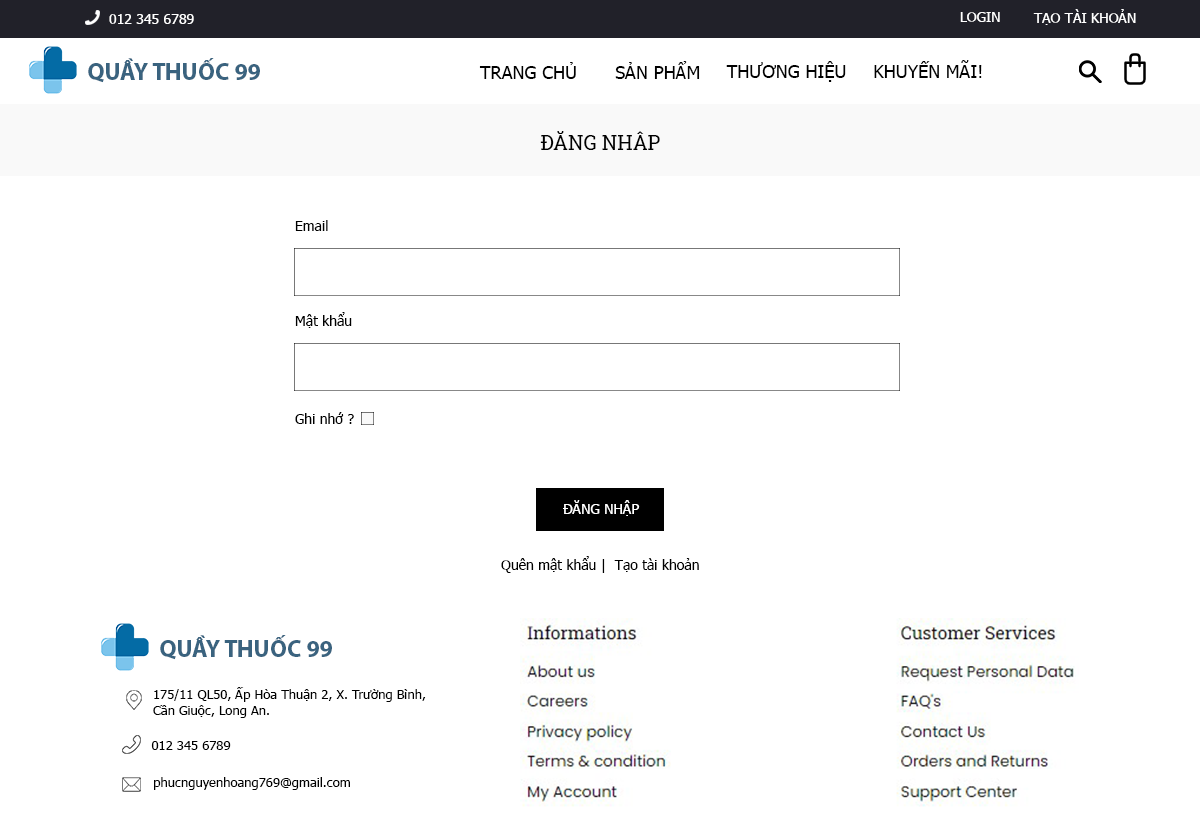
<style>
.page{position:relative;width:1200px;height:830px;background:#ffffff}
.page>*{position:absolute;margin:0}
.t1{font:14px "Tahoma";color:#ffffff}
.t2{font:24px "MyriadPro-Bold";color:#3a637f}
.t3{font:18px "Tahoma";color:#000000}
.t4{font:20px "RobotoSlab-Regular";color:#000000}
.t5{font:14px "Tahoma";color:#000000}
.t6{font:13px "Tahoma";color:#000000}
</style>
<div class="page">
<p class="t1" style="left:109px;top:14px;width:85px;height:10px">012 345 6789</p>
<p class="t1" style="left:960px;top:12px;width:40px;height:10px">LOGIN</p>
<p class="t1" style="left:1033px;top:9px;width:103px;height:16px">TẠO TÀI KHOẢN</p>
<p class="t2" style="left:88px;top:58px;width:172px;height:25px">QUẦY THUỐC 99</p>
<p class="t3" style="left:479px;top:62px;width:97px;height:17px">TRANG CHỦ</p>
<p class="t3" style="left:615px;top:61px;width:85px;height:18px">SẢN PHẨM</p>
<p class="t3" style="left:726px;top:61px;width:120px;height:21px">THƯƠNG HIỆU</p>
<p class="t3" style="left:874px;top:60px;width:108px;height:18px">KHUYẾN MÃI!</p>
<p class="t4" style="left:540px;top:131px;width:120px;height:19px">ĐĂNG NHÂP</p>
<p class="t5" style="left:295px;top:220px;width:33px;height:11px">Email</p>
<p class="t5" style="left:295px;top:312px;width:57px;height:16px">Mật khẩu</p>
<p class="t5" style="left:295px;top:412px;width:59px;height:12px">Ghi nhớ ?</p>
<p class="t1" style="left:563px;top:500px;width:77px;height:16px">ĐĂNG NHẬP</p>
<p class="t5" style="left:501px;top:556px;width:198px;height:17px">Quên mật khẩu |  Tạo tài khoản</p>
<p class="t2" style="left:160px;top:635px;width:172px;height:25px">QUẦY THUỐC 99</p>
<p class="t6" style="left:153px;top:687px;width:273px;height:31px">175/11 QL50, Ấp Hòa Thuận 2, X. Trường Bình, <br>Cần Giuộc, Long An.</p>
<p class="t6" style="left:151px;top:741px;width:80px;height:9px">012 345 6789</p>
<p class="t6" style="left:154px;top:777px;width:196px;height:13px">phucnguyenhoang769@gmail.com</p>
</div>
